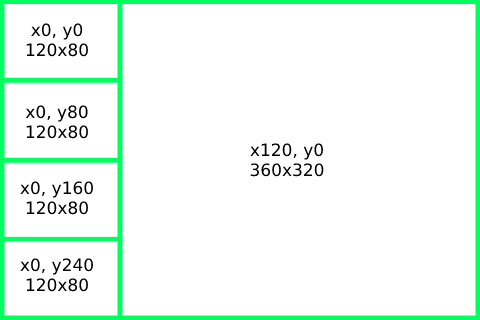
<style>
.page{position:relative;width:480px;height:320px;background:#ffffff}
.page>*{position:absolute;margin:0}
.t1{font:17px "DejaVuSans";color:#000000}
</style>
<div class="page">
<p class="t1" style="left:26px;top:23px;width:62px;height:34px;text-align:center">x0, y0<br>120x80</p>
<p class="t1" style="left:25px;top:105px;width:63px;height:34px;text-align:center">x0, y80<br>120x80</p>
<p class="t1" style="left:250px;top:143px;width:74px;height:34px;text-align:center">x120, y0<br>360x320</p>
<p class="t1" style="left:20px;top:181px;width:73px;height:34px;text-align:center">x0, y160<br>120x80</p>
<p class="t1" style="left:20px;top:258px;width:73px;height:34px;text-align:center">x0, y240<br>120x80</p>
</div>
